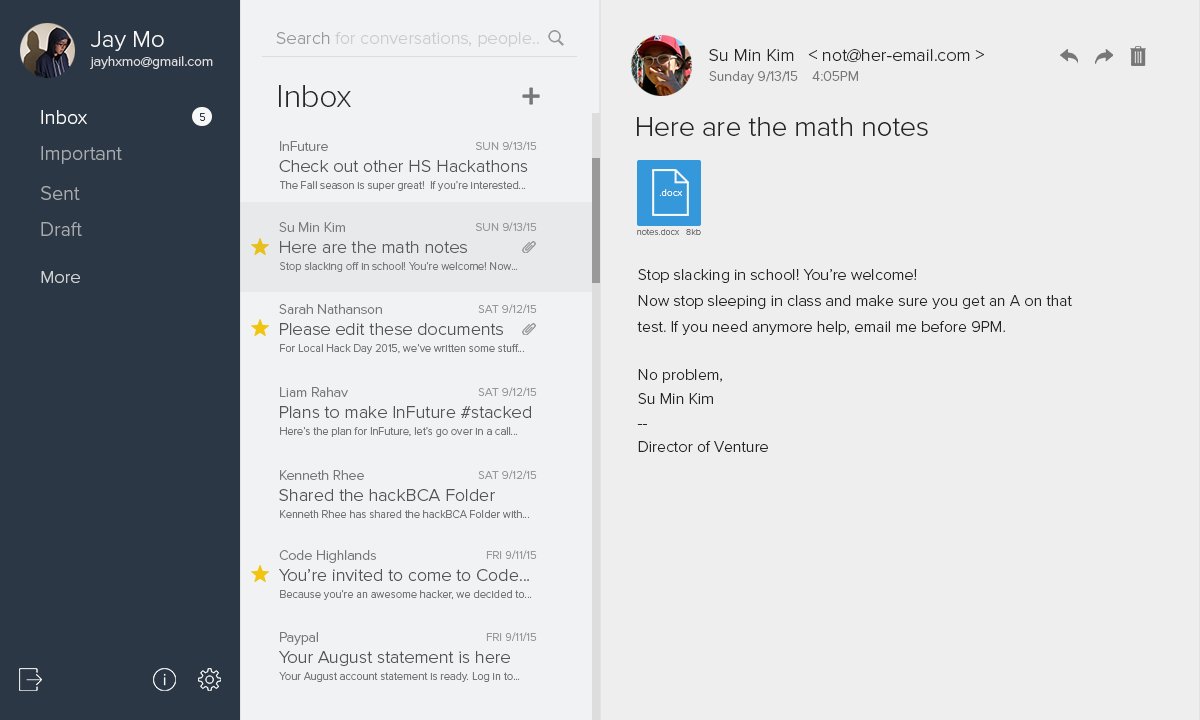
<style>
.page{position:relative;width:1200px;height:720px;background:#eeeeee}
.page>*{position:absolute;margin:0}
.t1{font:24px "ProximaNova-Light";color:#f7f7f7}
.t2{font:18px "ProximaNova-Light";color:#cccccc}
.t3{font:18px "ProximaNova-Light";color:#999999}
.t4{font:18px "ProximaNova-Light";color:#262626}
.t5{font:14px "ProximaNova-Light";color:#dddddd}
.t6{font:14px "ProximaNova-Light";color:#777777}
.t7{font:32px "ProximaNova-Light";color:#262626}
.t8{font:20px "ProximaNova-Light";color:#f7f7f7}
.t9{font:11px "ProximaNova-Light";color:#2b3745}
.t10{font:28px "ProximaNova-Light";color:#262626}
.t11{font:20px "ProximaNova-Light";color:#a6a9ad}
.t12{font:12px "ProximaNova-Light";color:#999999}
.t13{font:18px "ProximaNova-Light";color:#555555}
.t14{font:11px "ProximaNova-Light";color:#777777}
.t15{font:10px "ProximaNova-Light";color:#f7f7f7}
.t16{font:9px "ProximaNova-Light";color:#777777}
.t17{font:16px/26px "ProximaNova-Light";color:#262626}
.t18{font:18px "ProximaNova-Light";color:#d1d2d4}
.t19{font:16px/24px "ProximaNova-Light";color:#262626}
</style>
<div class="page">
<p class="t1" style="left:91px;top:31px;width:73px;height:20px">Jay Mo</p>
<p class="t2" style="left:276px;top:32px;width:263px;height:15px"><span class="t3">Search </span>for conversations, people..</p>
<p class="t4" style="left:709px;top:49px;width:275px;height:13px">Su Min Kim   &lt; not@her-email.com &gt;</p>
<p class="t5" style="left:90px;top:56px;width:123px;height:13px">jayhxmo@gmail.com</p>
<p class="t6" style="left:709px;top:71px;width:149px;height:13px">Sunday 9/13/15    4:05PM</p>
<p class="t7" style="left:279px;top:85px;width:72px;height:22px">Inbox</p>
<p class="t8" style="left:41px;top:110px;width:46px;height:14px">Inbox</p>
<p class="t9" style="left:200px;top:113px;width:6px;height:8px">5</p>
<p class="t10" style="left:637px;top:117px;width:291px;height:19px">Here are the math notes</p>
<p class="t11" style="left:41px;top:146px;width:81px;height:18px">Important</p>
<p class="t6" style="left:280px;top:141px;width:48px;height:10px">InFuture</p>
<p class="t12" style="left:476px;top:141px;width:61px;height:9px">SUN 9/13/15</p>
<p class="t13" style="left:279px;top:160px;width:249px;height:12px">Check out other HS Hackathons</p>
<p class="t14" style="left:279px;top:181px;width:247px;height:10px">The Fall season is super great!  If you’re interested...</p>
<p class="t11" style="left:41px;top:186px;width:39px;height:14px">Sent</p>
<p class="t15" style="left:659px;top:189px;width:23px;height:7px">.docx</p>
<p class="t11" style="left:41px;top:222px;width:41px;height:14px">Draft</p>
<p class="t6" style="left:279px;top:222px;width:66px;height:10px">Su Min Kim</p>
<p class="t12" style="left:476px;top:222px;width:61px;height:9px">SUN 9/13/15</p>
<p class="t16" style="left:637px;top:228px;width:42px;height:7px">notes.docx</p>
<p class="t16" style="left:686px;top:229px;width:15px;height:6px">8kb</p>
<p class="t13" style="left:280px;top:241px;width:187px;height:12px">Here are the math notes</p>
<p class="t14" style="left:280px;top:262px;width:238px;height:10px">Stop slacking off in school! You’re welcome! Now...</p>
<p class="t17" style="left:637px;top:269px;width:435px;height:66px">Stop slacking in school! You’re welcome!<br>Now stop sleeping in class and make sure you get an A on that<br>test. If you need anymore help, email me before 9PM.</p>
<p class="t18" style="left:41px;top:271px;width:39px;height:12px">More</p>
<p class="t6" style="left:279px;top:304px;width:103px;height:10px">Sarah Nathanson</p>
<p class="t12" style="left:478px;top:304px;width:59px;height:9px">SAT 9/12/15</p>
<p class="t13" style="left:280px;top:323px;width:223px;height:12px">Please edit these documents</p>
<p class="t14" style="left:280px;top:344px;width:245px;height:10px">For Local Hack Day 2015, we’ve written some stuff...</p>
<p class="t19" style="left:637px;top:369px;width:131px;height:83px">No problem,<br>Su Min Kim<br>--<br>Director of Venture</p>
<p class="t6" style="left:280px;top:387px;width:68px;height:10px">Liam Rahav</p>
<p class="t12" style="left:478px;top:387px;width:59px;height:9px">SAT 9/12/15</p>
<p class="t13" style="left:280px;top:406px;width:251px;height:12px">Plans to make InFuture #stacked</p>
<p class="t14" style="left:280px;top:427px;width:238px;height:10px">Here’s the plan for InFuture, let’s go over in a call...</p>
<p class="t6" style="left:280px;top:470px;width:84px;height:10px">Kenneth Rhee</p>
<p class="t12" style="left:478px;top:470px;width:59px;height:9px">SAT 9/12/15</p>
<p class="t13" style="left:279px;top:489px;width:216px;height:12px">Shared the hackBCA Folder</p>
<p class="t14" style="left:280px;top:510px;width:250px;height:8px">Kenneth Rhee has shared the hackBCA Folder with...</p>
<p class="t6" style="left:279px;top:550px;width:97px;height:13px">Code Highlands</p>
<p class="t12" style="left:486px;top:550px;width:51px;height:9px">FRI 9/11/15</p>
<p class="t13" style="left:279px;top:569px;width:250px;height:12px">You’re invited to come to Code...</p>
<p class="t14" style="left:280px;top:590px;width:252px;height:10px">Because you’re an awesome hacker, we decided to...</p>
<p class="t6" style="left:280px;top:632px;width:38px;height:13px">Paypal</p>
<p class="t12" style="left:486px;top:632px;width:51px;height:9px">FRI 9/11/15</p>
<p class="t13" style="left:279px;top:651px;width:231px;height:15px">Your August statement is here</p>
<p class="t14" style="left:279px;top:672px;width:241px;height:10px">Your August account statement is ready. Log in to...</p>
</div>
